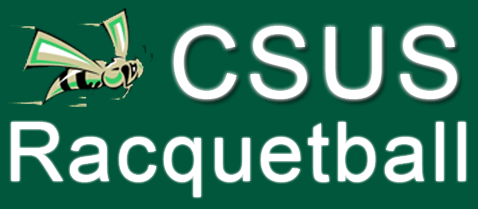
<style>
.page{position:relative;width:478px;height:209px;background:#01573c}
.page>*{position:absolute;margin:0}
.t1{font:99px "ArialMT";letter-spacing:0.06em;color:#ffffff}
.t2{font:82px "ArialMT";letter-spacing:0.04em;color:#ffffff}
</style>
<div class="page">
<p class="t1" style="left:173px;top:26px;width:284px;height:73px">CSUS</p>
<p class="t2" style="left:11px;top:122px;width:455px;height:75px">Racquetball</p>
</div>
